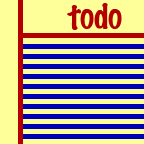
<style>
.page{position:relative;width:144px;height:144px;background:#ffff99}
.page>*{position:absolute;margin:0}
.t1{font:34px "MarkerFelt-Thin";color:#b40000}
</style>
<div class="page">
<p class="t1" style="left:67px;top:3px;width:55px;height:27px">todo</p>
</div>
